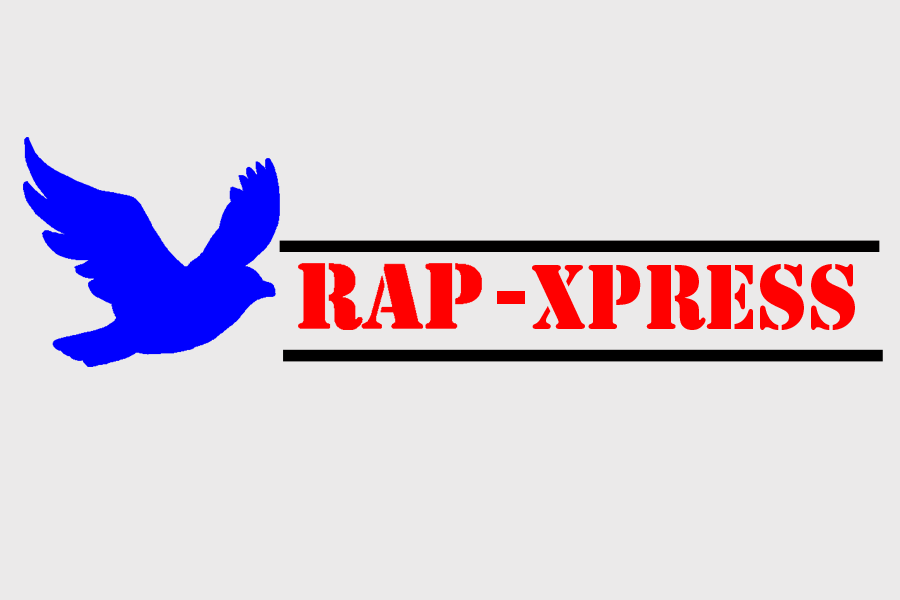
<style>
.page{position:relative;width:900px;height:600px;background:#ebeaea}
.page>*{position:absolute;margin:0}
.t1{font:85.1px "StencilStd";color:#ff0000;scale:0.94 1}
</style>
<div class="page">
<p class="t1" style="left:497px;top:264px;width:358px;height:66px">-xpress</p>
</div>
